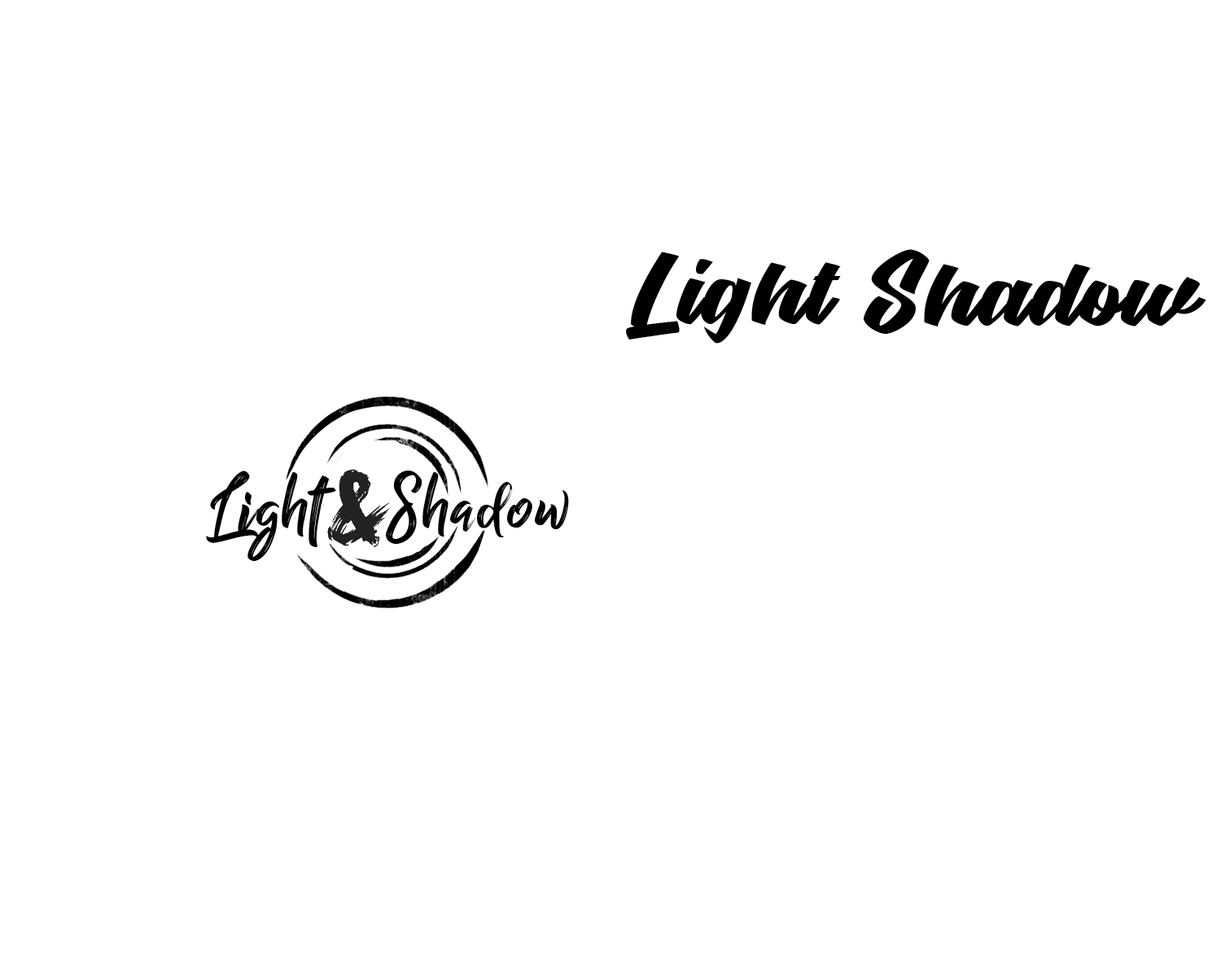
<style>
.page{position:relative;width:1221px;height:977px;background:#ffffff}
.page>*{position:absolute;margin:0}
.t1{font:81.4px "GracelandPersonalUse";letter-spacing:0.025em;color:#000000}
.t2{font:81.4px "BillyOhio";letter-spacing:0.025em;color:#000000}
</style>
<div class="page">
<p class="t1" style="left:626px;top:252px;width:215px;height:91px">Light</p>
<p class="t1" style="left:863px;top:249px;width:343px;height:85px">Shadow</p>
<p class="t2" style="left:206px;top:470px;width:131px;height:91px">Light</p>
<p class="t2" style="left:386px;top:470px;width:183px;height:74px">Shadow</p>
</div>
